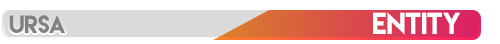
<style>
.page{position:relative;width:500px;height:44px;background:#ffffff}
.page>*{position:absolute;margin:0}
.t1{font:22.4px "LemonMilk";letter-spacing:-0.02em;color:#7b7b7b}
.t2{font:27.1px "LemonMilk";letter-spacing:-0.02em;color:#ffffff}
</style>
<div class="page">
<p class="t1" style="left:9px;top:15px;width:56px;height:18px">URSA</p>
<p class="t2" style="left:373px;top:12px;width:87px;height:23px">entity</p>
</div>
